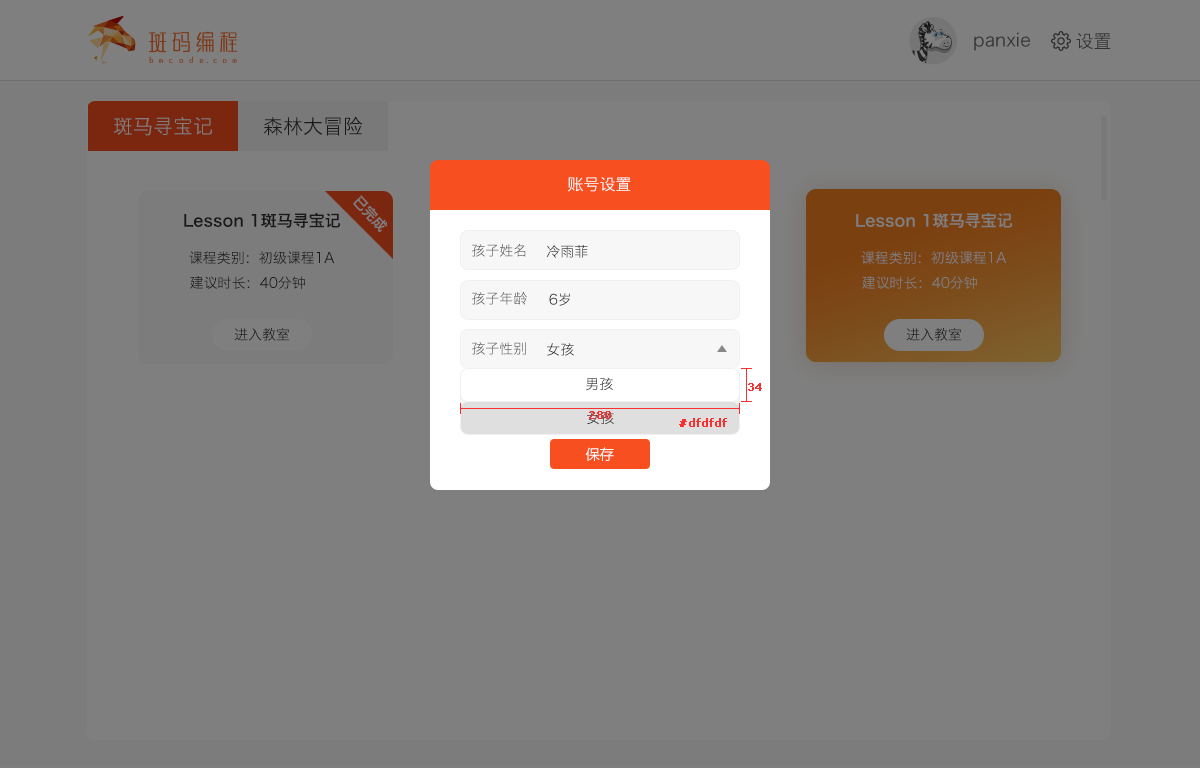
<style>
.page{position:relative;width:1200px;height:768px;background:#7f7f7f}
.page>*{position:absolute;margin:0}
.t1{font:18px "HiraginoSansGB-W3";color:#333333}
.t2{font:20px "HiraginoSansGB-W3";color:#7f7f7f}
.t3{font:20px "HiraginoSansGB-W3";color:#191919}
.t4{font:16px "HiraginoSansGB-W3";color:#ffffff}
.t5{font:14px "HiraginoSansGB-W6";color:#7f7f7f}
.t6{font:16px "HiraginoSansGB-W6";color:#191919}
.t7{font:16px "HiraginoSansGB-W6";color:#7f7f7f}
.t8{font:14px "HiraginoSansGB-W3";color:#666666}
.t9{font:14px "HiraginoSansGB-W3";color:#333333}
.t10{font:14px "HiraginoSansGB-W3";color:#191919}
.t11{font:14px "HiraginoSansGB-W3";color:#7f7f7f}
.t12{font:14px "HiraginoSansGB-W3"}
.t13{font:11px "Verdana";color:#f83030;font-weight:bold}
.t14{font:14px "MicrosoftYaHei";color:#ffffff}
</style>
<div class="page">
<p class="t1" style="left:974px;top:32px;width:56px;height:19px">panxie</p>
<p class="t1" style="left:1076px;top:33px;width:35px;height:17px">设置</p>
<p class="t2" style="left:114px;top:116px;width:98px;height:20px">斑马寻宝记</p>
<p class="t3" style="left:263px;top:116px;width:100px;height:20px">森林大冒险</p>
<p class="t4" style="left:568px;top:177px;width:63px;height:15px">账号设置</p>
<p class="t5" style="left:353px;top:195px;width:35px;height:37px;rotate:47deg">已完成</p>
<p class="t6" style="left:184px;top:212px;width:156px;height:16px">Lesson 1斑马寻宝记</p>
<p class="t7" style="left:856px;top:212px;width:156px;height:16px">Lesson 1斑马寻宝记</p>
<p class="t8" style="left:472px;top:244px;width:54px;height:13px">孩子姓名</p>
<p class="t9" style="left:546px;top:245px;width:42px;height:13px">冷雨菲</p>
<p class="t10" style="left:189px;top:251px;width:146px;height:14px">课程类别：初级课程1A</p>
<p class="t11" style="left:861px;top:251px;width:146px;height:14px">课程类别：初级课程1A</p>
<p class="t10" style="left:190px;top:276px;width:115px;height:13px">建议时长：40分钟</p>
<p class="t11" style="left:862px;top:276px;width:115px;height:13px">建议时长：40分钟</p>
<p class="t8" style="left:472px;top:291px;width:55px;height:14px">孩子年龄</p>
<p class="t9" style="left:549px;top:293px;width:21px;height:13px">6岁</p>
<p class="t9" style="left:234px;top:327px;width:56px;height:14px">进入教室</p>
<p class="t9" style="left:906px;top:327px;width:56px;height:14px">进入教室</p>
<p class="t8" style="left:472px;top:342px;width:54px;height:13px">孩子性别</p>
<p class="t9" style="left:547px;top:343px;width:27px;height:13px">女孩</p>
<p class="t12" style="left:586px;top:377px;width:27px;height:14px">男孩</p>
<p class="t13" style="left:748px;top:383px;width:14px;height:8px">34</p>
<p class="t9" style="left:587px;top:411px;width:27px;height:14px">女孩</p>
<p class="t13" style="left:589px;top:411px;width:22px;height:8px">280</p>
<p class="t13" style="left:679px;top:418px;width:48px;height:9px">#dfdfdf</p>
<p class="t14" style="left:585px;top:447px;width:29px;height:14px">保存</p>
</div>
